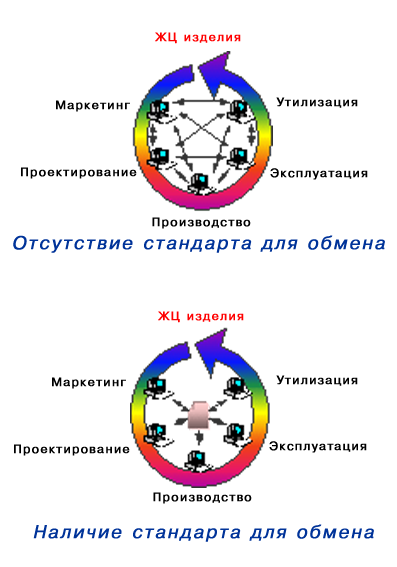
<style>
.page{position:relative;width:397px;height:567px;background:#ffffff}
.page>*{position:absolute;margin:0}
.t1{font:12px "PragmaticaPlain";letter-spacing:0.1em;color:#ff0000;font-weight:bold}
.t2{font:12px "PragmaticaPlain";letter-spacing:0.1em;color:#000000;font-weight:bold}
.t3{font:18px "PragmaticaItalic";letter-spacing:0.1em;color:#003399;font-weight:bold}
</style>
<div class="page">
<p class="t1" style="left:155px;top:32px;width:86px;height:12px">ÆÖ èçäåëèÿ</p>
<p class="t2" style="left:56px;top:100px;width:74px;height:12px">Ìàðêåòèíã</p>
<p class="t2" style="left:276px;top:97px;width:82px;height:11px">Óòèëèçàöèÿ</p>
<p class="t2" style="left:21px;top:167px;width:116px;height:12px">Ïðîåêòèðîâàíèå</p>
<p class="t2" style="left:270px;top:168px;width:98px;height:12px">Ýêñïëóàòàöèÿ</p>
<p class="t2" style="left:152px;top:217px;width:99px;height:12px">Ïðîèçâîäñòâî</p>
<p class="t3" style="left:13px;top:235px;width:372px;height:18px">Îòñóòñòâèå ñòàíäàðòà äëÿ îáìåíà</p>
<p class="t1" style="left:158px;top:311px;width:86px;height:12px">ÆÖ èçäåëèÿ</p>
<p class="t2" style="left:52px;top:377px;width:74px;height:12px">Ìàðêåòèíã</p>
<p class="t2" style="left:276px;top:375px;width:82px;height:11px">Óòèëèçàöèÿ</p>
<p class="t2" style="left:14px;top:444px;width:116px;height:12px">Ïðîåêòèðîâàíèå</p>
<p class="t2" style="left:269px;top:441px;width:98px;height:12px">Ýêñïëóàòàöèÿ</p>
<p class="t2" style="left:153px;top:492px;width:99px;height:12px">Ïðîèçâîäñòâî</p>
<p class="t3" style="left:33px;top:524px;width:341px;height:18px">Íàëè÷èå ñòàíäàðòà äëÿ îáìåíà</p>
</div>
